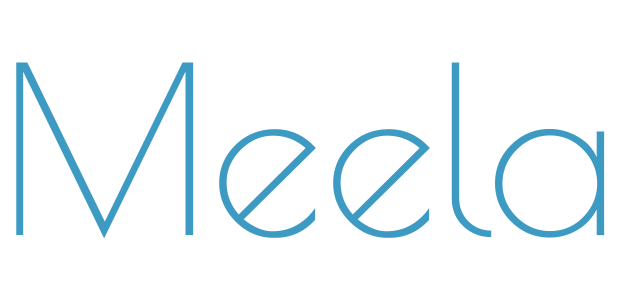
<style>
.page{position:relative;width:620px;height:300px;background:#ffffff}
.page>*{position:absolute;margin:0}
.t1{font:230px "PoiretOne-Regular";color:#3d9ac3}
</style>
<div class="page">
<p class="t1" style="left:16px;top:62px;width:589px;height:177px">Meela</p>
</div>
